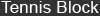
<style>
.page{position:relative;width:100px;height:16px;background:#333333}
.page>*{position:absolute;margin:0}
.t1{font:17.5px "ArialMT";color:#ffffff}
</style>
<div class="page">
<p class="t1" style="left:1px;top:1px;width:98px;height:12px">Tennis Block</p>
</div>
